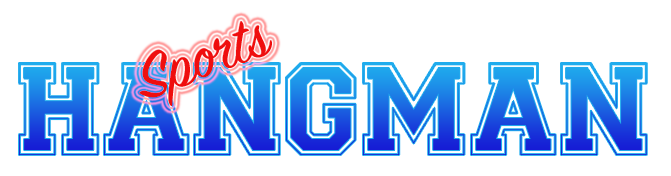
<style>
.page{position:relative;width:671px;height:176px;background:#ffffff}
.page>*{position:absolute;margin:0}
.t1{font:69px "SignPainter-HouseScript";color:#ef0e0e}
.t2{font:110px "CollegiateFLF"}
</style>
<div class="page">
<p class="t1" style="left:139px;top:21px;width:133px;height:85px;rotate:-20deg">Sports</p>
<p class="t2" style="left:19px;top:63px;width:628px;height:92px">HANGMAN</p>
</div>
